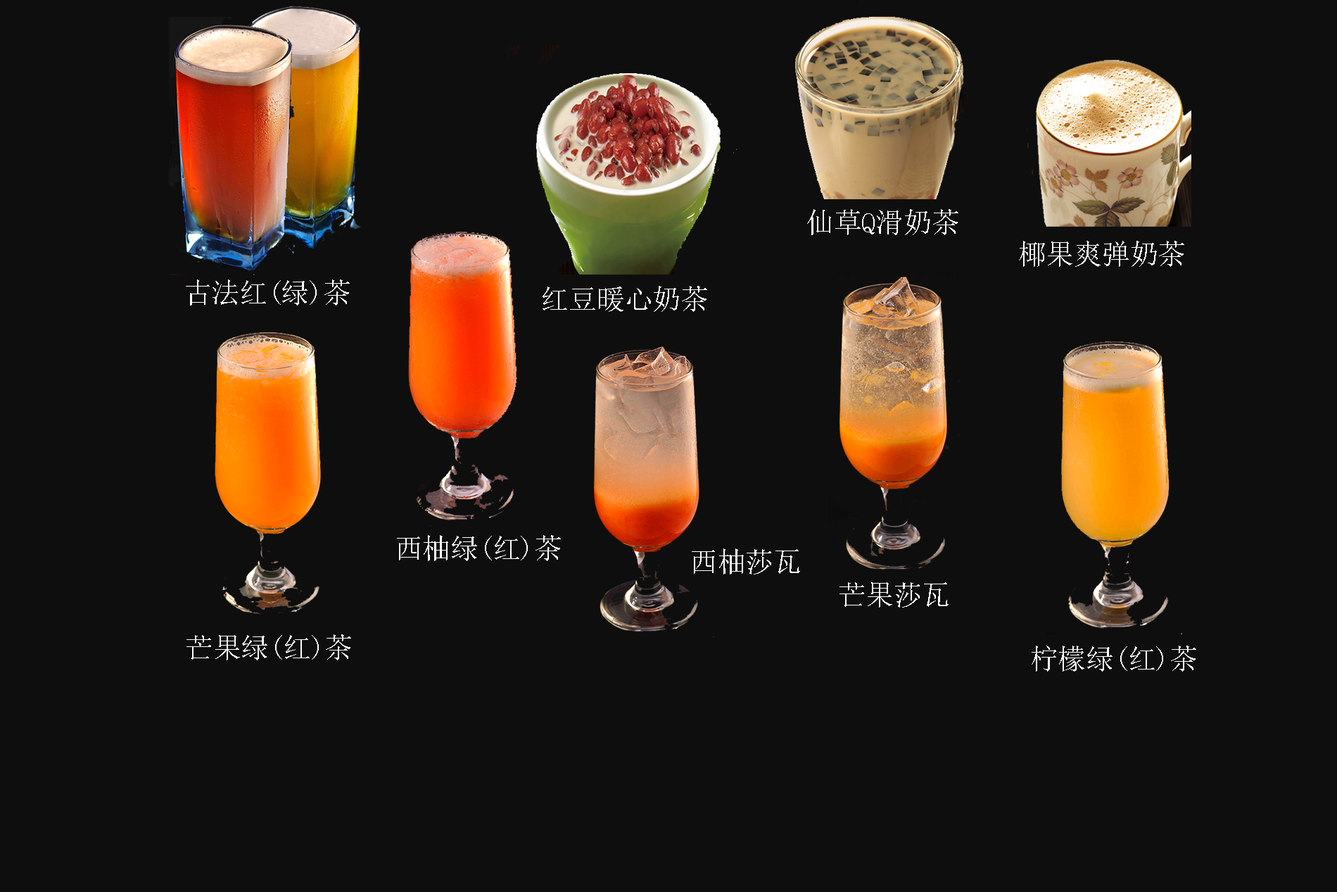
<style>
.page{position:relative;width:1337px;height:892px;background:#0e0e0e}
.page>*{position:absolute;margin:0}
.t1{font:27.9px "SimSun";color:#ffffff}
</style>
<div class="page">
<p class="t1" style="left:807px;top:209px;width:152px;height:26px">仙草Q滑奶茶</p>
<p class="t1" style="left:1019px;top:241px;width:166px;height:26px">椰果爽弹奶茶</p>
<p class="t1" style="left:186px;top:279px;width:164px;height:26px">古法红(绿)茶</p>
<p class="t1" style="left:543px;top:286px;width:164px;height:26px">红豆暖心奶茶</p>
<p class="t1" style="left:397px;top:535px;width:164px;height:26px">西柚绿(红)茶</p>
<p class="t1" style="left:692px;top:548px;width:108px;height:26px">西柚莎瓦</p>
<p class="t1" style="left:840px;top:582px;width:109px;height:25px">芒果莎瓦</p>
<p class="t1" style="left:187px;top:634px;width:164px;height:26px">芒果绿(红)茶</p>
<p class="t1" style="left:1032px;top:645px;width:164px;height:26px">柠檬绿(红)茶</p>
</div>
